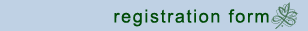
<style>
.page{position:relative;width:308px;height:31px;background:#bfd1e4}
.page>*{position:absolute;margin:0}
.t1{font:18px "ArialMT";letter-spacing:0.09em;color:#004b07}
</style>
<div class="page">
<p class="t1" style="left:114px;top:9px;width:155px;height:18px">registration form</p>
</div>
